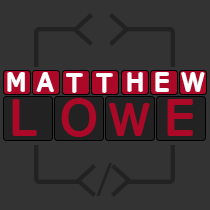
<style>
.page{position:relative;width:210px;height:210px;background:#333333}
.page>*{position:absolute;margin:0}
.t1{font:24px "Verdana";letter-spacing:0.2em;color:#ffffff}
.t2{font:48px "Verdana";letter-spacing:0.2em;color:#ac0928}
.t3{font:42.9px "Verdana";letter-spacing:0.2em;color:#ac0928}
.t4{font:36px "Verdana";letter-spacing:0.2em;color:#222222}
</style>
<div class="page">
<p class="t1" style="left:8px;top:73px;width:16px;height:18px">M</p>
<p class="t1" style="left:37px;top:73px;width:16px;height:18px">A</p>
<p class="t1" style="left:67px;top:74px;width:15px;height:18px">T</p>
<p class="t1" style="left:97px;top:74px;width:15px;height:18px">T</p>
<p class="t1" style="left:128px;top:73px;width:14px;height:18px">H</p>
<p class="t1" style="left:156px;top:73px;width:12px;height:18px">E</p>
<p class="t1" style="left:182px;top:73px;width:22px;height:18px">W</p>
<p class="t2" style="left:13px;top:100px;width:23px;height:35px">L</p>
<p class="t2" style="left:62px;top:99px;width:34px;height:37px">O</p>
<p class="t2" style="left:168px;top:100px;width:24px;height:35px">E</p>
<p class="t3" style="left:110px;top:104px;width:39px;height:31px">W</p>
<p class="t4" style="left:96px;top:163px;width:16px;height:33px">/</p>
</div>
